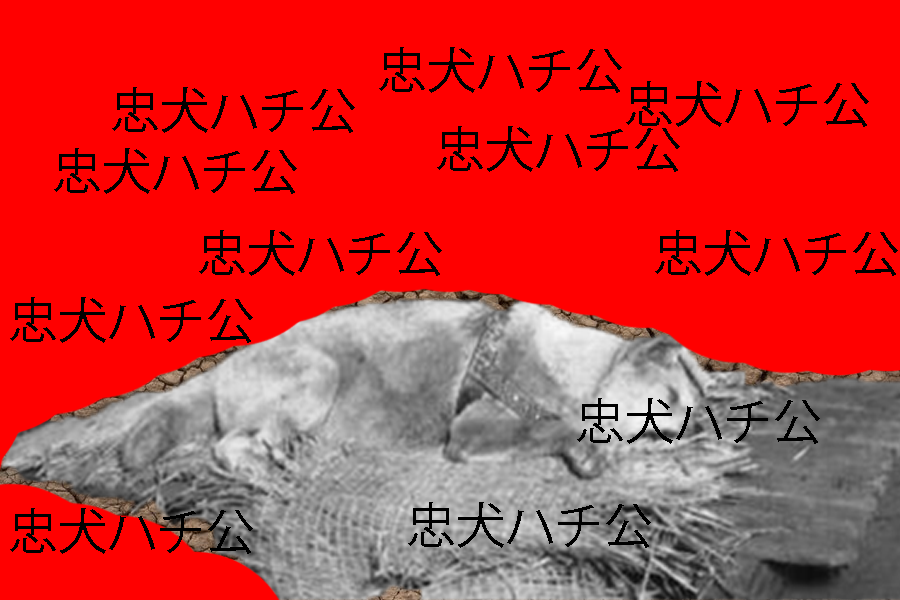
<style>
.page{position:relative;width:900px;height:600px;background:#ff0000}
.page>*{position:absolute;margin:0}
.t1{font:49.4px "KozGoPr6N-Regular";color:#000000}
</style>
<div class="page">
<p class="t1" style="left:379px;top:47px;width:243px;height:46px">忠犬ハチ公</p>
<p class="t1" style="left:112px;top:87px;width:243px;height:46px">忠犬ハチ公</p>
<p class="t1" style="left:626px;top:81px;width:243px;height:46px">忠犬ハチ公</p>
<p class="t1" style="left:437px;top:126px;width:243px;height:46px">忠犬ハチ公</p>
<p class="t1" style="left:54px;top:148px;width:243px;height:46px">忠犬ハチ公</p>
<p class="t1" style="left:199px;top:230px;width:243px;height:46px">忠犬ハチ公</p>
<p class="t1" style="left:655px;top:230px;width:243px;height:46px">忠犬ハチ公</p>
<p class="t1" style="left:10px;top:297px;width:243px;height:46px">忠犬ハチ公</p>
<p class="t1" style="left:577px;top:398px;width:243px;height:46px">忠犬ハチ公</p>
<p class="t1" style="left:10px;top:508px;width:243px;height:46px">忠犬ハチ公</p>
<p class="t1" style="left:408px;top:502px;width:243px;height:46px">忠犬ハチ公</p>
</div>
